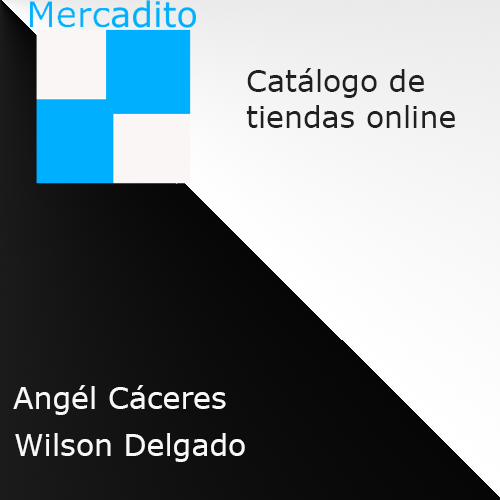
<style>
.page{position:relative;width:500px;height:500px}
.page>*{position:absolute;margin:0}
.t1{font:30px "Verdana";color:#1f2020}
.t2{font:30px "Verdana";color:#f6f8f9}
</style>
<div class="page">
<p class="t1" style="left:246px;top:68px;width:209px;height:60px">Catálogo de tiendas online</p>
<p class="t2" style="left:13px;top:385px;width:213px;height:30px">Angél Cáceres</p>
<p class="t2" style="left:15px;top:433px;width:230px;height:29px">Wilson Delgado</p>
</div>
